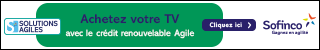
<style>
.page{position:relative;width:320px;height:50px;background:#ffffff}
.page>*{position:absolute;margin:0}
.t1{font:12.8px/12.8px "AbadiMTProBold";color:#292069}
.t2{font:12.8px/12.8px "AbadiMTProBold";letter-spacing:0.009em;color:#292069}
.t3{font:12.8px/12.8px "AbadiMTProBold";letter-spacing:-0.029em;color:#292069}
.t4{font:9.1px/12.8px "AbadiMTPro";letter-spacing:-0.009em;color:#ffffff}
.t5{font:9.1px/12.8px "AbadiMTPro";color:#ffffff}
.t6{font:9.1px/12.8px "AbadiMTPro";letter-spacing:-0.029em;color:#ffffff}
.t7{font:9.1px/12.8px "AbadiMTPro";letter-spacing:-0.01em;color:#ffffff}
</style>
<div class="page">
<p class="t1" style="left:65px;top:14px;width:130px;height:25px;text-align:center">A<span class="t2">c</span>hetez vot<span class="t3">r</span>e TV<br><span class="t4">av</span><span class="t5">ec le c</span><span class="t6">r</span><span class="t5">édit </span><span class="t6">r</span><span class="t5">enou</span><span class="t7">v</span><span class="t5">el</span><span class="t4">ab</span><span class="t5">le Agile</span></p>
</div>
